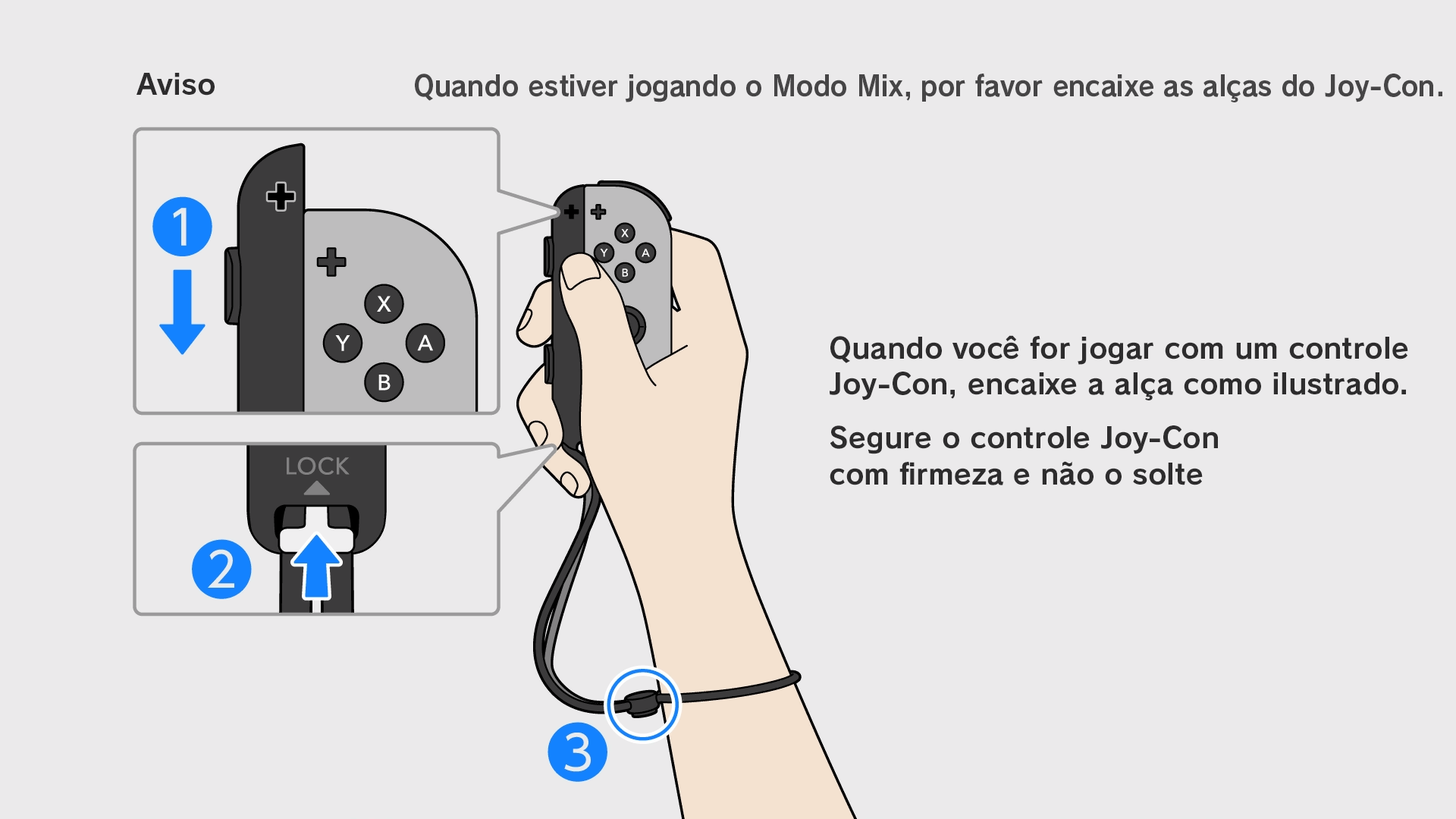
<style>
.page{position:relative;width:1456px;height:819px;background:#ebeaeb}
.page>*{position:absolute;margin:0}
.t1{font:28.3px "RodinNTLGPro-B";color:#2d2c2d}
.t2{font:28.3px "RodinNTLGPro-B";color:#464546;scale:0.93 1}
</style>
<div class="page">
<p class="t1" style="left:136px;top:73px;width:79px;height:23px">Aviso</p>
<p class="t2" style="left:415px;top:74px;width:1027px;height:28px">Quando estiver jogando o Modo Mix, por favor encaixe as alças do Joy-Con.</p>
<p class="t1" style="left:830px;top:335px;width:578px;height:30px">Quando você for jogar com um controle</p>
<p class="t1" style="left:830px;top:372px;width:576px;height:28px">Joy-Con, encaixe a alça como ilustrado.</p>
<p class="t1" style="left:830px;top:425px;width:388px;height:29px">Segure o controle Joy-Con</p>
<p class="t1" style="left:830px;top:461px;width:373px;height:24px">com firmeza e não o solte</p>
</div>
